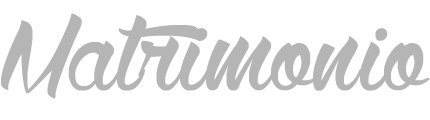
<style>
.page{position:relative;width:430px;height:120px;background:#ffffff}
.page>*{position:absolute;margin:0}
.t1{font:180px "WolfintheCityLight";color:#b5b5b5}
</style>
<div class="page">
<p class="t1" style="left:1px;top:13px;width:429px;height:86px">Matrimonio</p>
</div>
